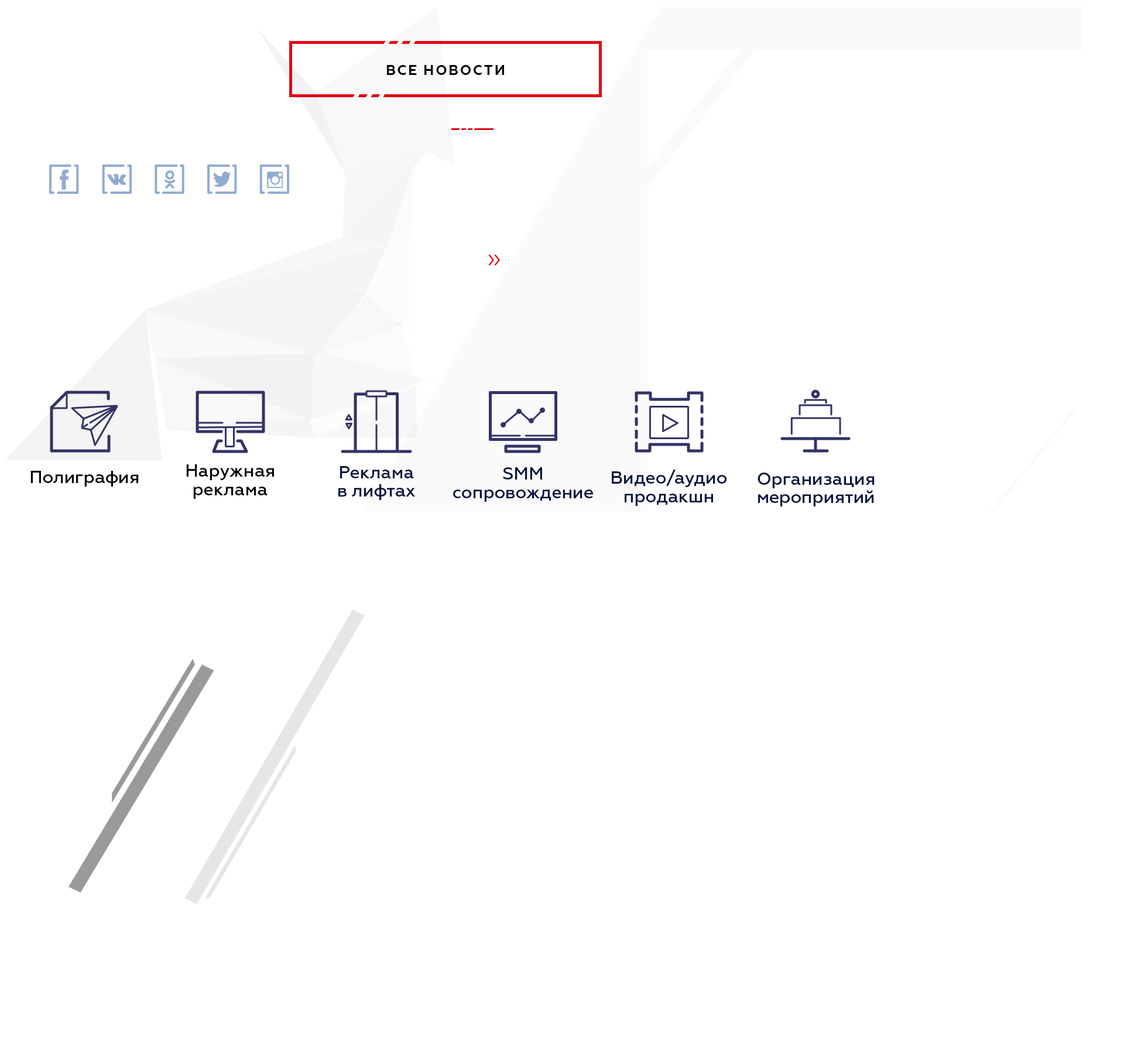
<style>
.page{position:relative;width:1124px;height:1061px;background:#ffffff}
.page>*{position:absolute;margin:0}
.t1{font:14.1px "Geometria-Bold";letter-spacing:0.1em;color:#000000;text-transform:uppercase}
.t2{font:17.6px "Geometria-Medium";color:#000000}
.t3{font:17.6px/17px "Geometria-Medium";color:#000000}
.t4{font:17.6px/17px "Geometria-Medium";color:#01103c}
</style>
<div class="page">
<p class="t1" style="left:387px;top:65px;width:117px;height:10px">Все новости</p>
<p class="t2" style="left:30px;top:471px;width:109px;height:16px">Полиграфия</p>
<p class="t3" style="left:186px;top:464px;width:88px;height:35px;text-align:center">Наружная<br>реклама</p>
<p class="t4" style="left:338px;top:466px;width:77px;height:34px;text-align:center">Реклама<br>в лифтах</p>
<p class="t4" style="left:453px;top:467px;width:140px;height:35px;text-align:center">SMM<br>сопровождение</p>
<p class="t4" style="left:612px;top:470px;width:115px;height:36px;text-align:center">Видео/аудио<br>продакшн</p>
<p class="t4" style="left:758px;top:472px;width:117px;height:34px;text-align:center">Организация<br>мероприятий</p>
</div>
